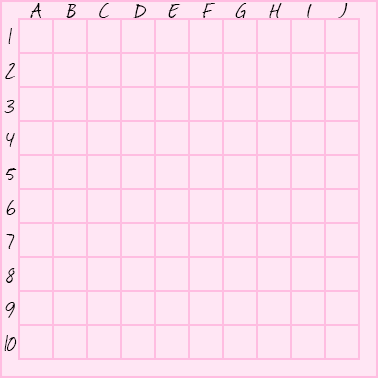
<style>
.page{position:relative;width:378px;height:378px;background:#ffe6f4}
.page>*{position:absolute;margin:0}
.t1{font:24px "Journal";color:#000000}
.t2{font:22.3px "Journal";color:#000000;scale:1.08 1}
.t3{font:22.8px "Journal";color:#000000;scale:1.05 1}
.t4{font:22.1px "Journal";color:#000000;scale:1.09 1}
.t5{font:19.5px "Journal";color:#000000;scale:1.23 1}
</style>
<div class="page">
<p class="t1" style="left:30px;top:3px;width:12px;height:15px">A</p>
<p class="t1" style="left:66px;top:4px;width:10px;height:14px">B</p>
<p class="t2" style="left:99px;top:3px;width:10px;height:15px">C</p>
<p class="t1" style="left:133px;top:4px;width:14px;height:14px">D</p>
<p class="t1" style="left:168px;top:4px;width:13px;height:14px">E</p>
<p class="t3" style="left:202px;top:3px;width:13px;height:15px">F</p>
<p class="t3" style="left:235px;top:3px;width:12px;height:15px">G</p>
<p class="t4" style="left:269px;top:3px;width:13px;height:15px">H</p>
<p class="t1" style="left:307px;top:4px;width:5px;height:14px">I</p>
<p class="t5" style="left:338px;top:3px;width:10px;height:15px">J</p>
<p class="t1" style="left:8px;top:28px;width:4px;height:16px">1</p>
<p class="t1" style="left:5px;top:63px;width:10px;height:16px">2</p>
<p class="t1" style="left:4px;top:100px;width:11px;height:13px">3</p>
<p class="t1" style="left:6px;top:133px;width:9px;height:14px">4</p>
<p class="t1" style="left:5px;top:168px;width:12px;height:12px">5</p>
<p class="t1" style="left:6px;top:200px;width:10px;height:15px">6</p>
<p class="t1" style="left:6px;top:234px;width:9px;height:15px">7</p>
<p class="t1" style="left:6px;top:268px;width:9px;height:15px">8</p>
<p class="t1" style="left:5px;top:302px;width:10px;height:16px">9</p>
<p class="t1" style="left:4px;top:335px;width:13px;height:16px">10</p>
</div>
